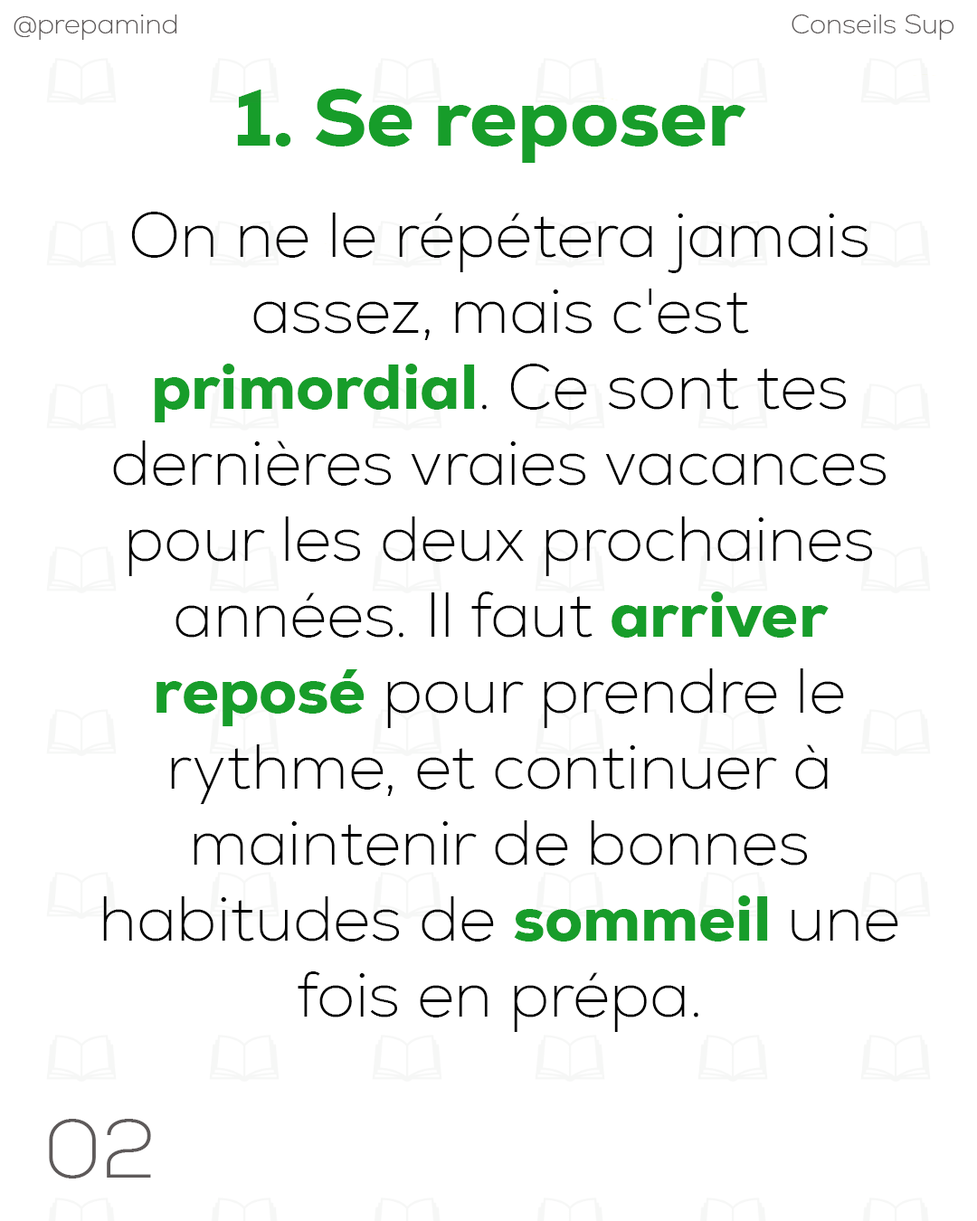
<style>
.page{position:relative;width:977px;height:1221px;background:#ffffff}
.page>*{position:absolute;margin:0}
.t1{font:27.1px "Nexa-ExtraLight";color:#5e5a5a}
.t2{font:81.2px "Nexa-Heavy";color:#179d2a}
.t3{font:63.3px "Nexa-ExtraLight";color:#000000}
.t4{font:63.3px "Nexa-Heavy";color:#179d2a}
.t5{font:81.7px "Nexa-ExtraLight";color:#5e5a5a}
</style>
<div class="page">
<p class="t1" style="left:14px;top:14px;width:163px;height:26px">@prepamind</p>
<p class="t1" style="left:791px;top:14px;width:163px;height:26px">Conseils Sup</p>
<p class="t2" style="left:237px;top:89px;width:509px;height:74px">1. Se reposer</p>
<p class="t3" style="left:103px;top:212px;width:795px;height:820px;text-align:center">On ne le répétera jamais assez, mais c'est <span class="t4">primordial</span>. Ce sont tes dernières vraies vacances pour les deux prochaines années. Il faut <span class="t4">arriver reposé</span> pour prendre le rythme, et continuer à maintenir de bonnes habitudes de <span class="t4">sommeil</span> une fois en prépa.</p>
<p class="t5" style="left:49px;top:1119px;width:102px;height:59px">02</p>
</div>
